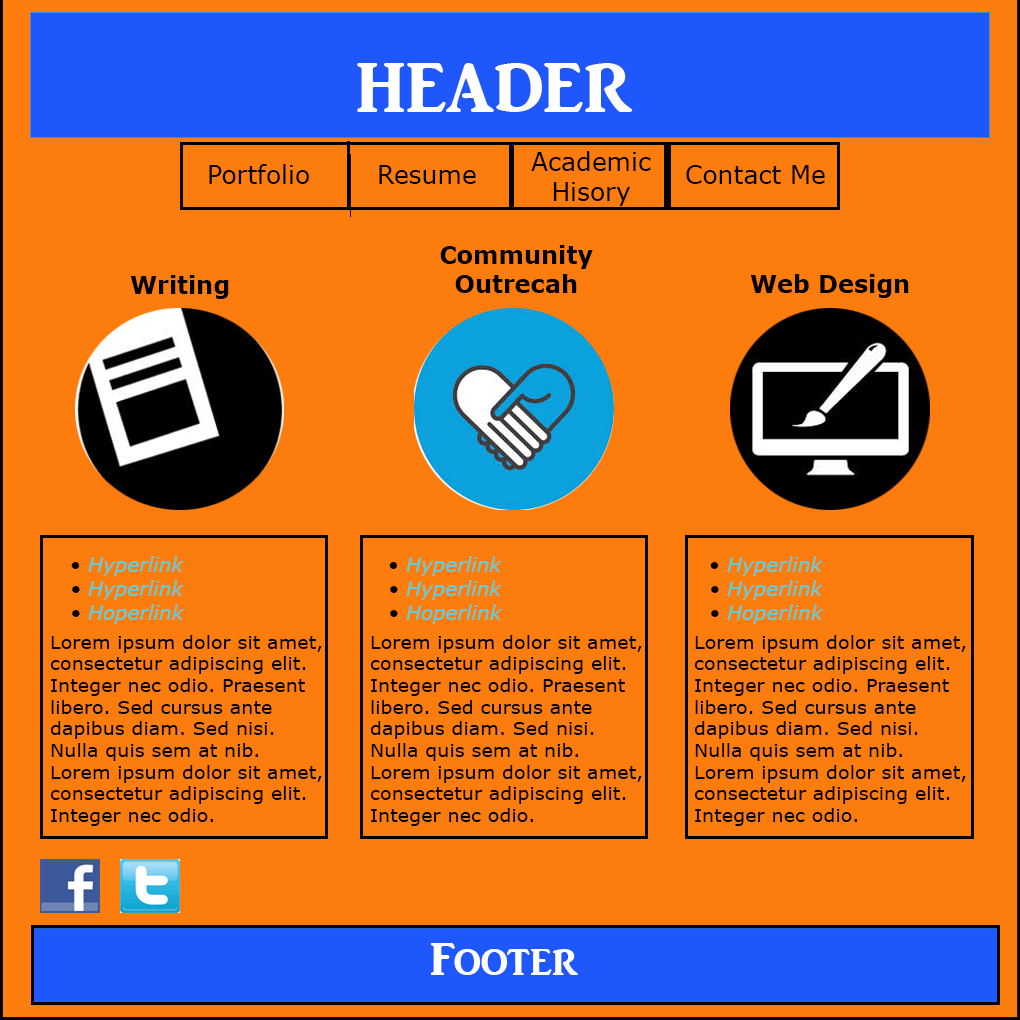
<style>
.page{position:relative;width:1020px;height:1020px;background:#fc7d0d}
.page>*{position:absolute;margin:0}
.t1{font:72px "ARJULIAN";color:#ffffff}
.t2{font:72px "ARJULIAN";color:#66ffff}
.t3{font:25px "Verdana";color:#000000}
.t4{font:24px "Verdana-Bold";color:#000000}
.t5{font:20px "Verdana-Italic";color:#58cfdd}
.t6{font:20px "Verdana";color:#000000}
.t7{font:20px "Verdana-Italic";color:#000000}
.t8{font:18.1px "Verdana";color:#000000;scale:1.06 1}
.t9{font:48px "ARJULIAN";color:#ffffff}
</style>
<div class="page">
<p class="t1" style="left:357px;top:63px;width:276px;height:49px">HEADER</p>
<p class="t1" style="left:357px;top:63px;width:276px;height:49px"><span class="t2"><br></span>HEADER</p>
<p class="t3" style="left:531px;top:151px;width:120px;height:55px;text-align:center">Academic<br>Hisory</p>
<p class="t3" style="left:209px;top:164px;width:100px;height:20px">Portfolio</p>
<p class="t3" style="left:379px;top:165px;width:97px;height:19px">Resume</p>
<p class="t3" style="left:686px;top:165px;width:139px;height:19px">Contact Me</p>
<p class="t4" style="left:440px;top:245px;width:153px;height:48px;text-align:center">Community<br>Outrecah</p>
<p class="t4" style="left:130px;top:275px;width:99px;height:24px">Writing</p>
<p class="t4" style="left:750px;top:274px;width:159px;height:24px">Web Design</p>
<p class="t5" style="left:71px;top:556px;width:114px;height:68px"><span class="t6">• </span>Hyperlink<br><span class="t7">•</span> Hyperlink<br><span class="t7">• </span>Hoperlink</p>
<p class="t5" style="left:389px;top:556px;width:114px;height:68px"><span class="t6">• </span>Hyperlink<br><span class="t7">•</span> Hyperlink<br><span class="t7">• </span>Hoperlink</p>
<p class="t5" style="left:710px;top:556px;width:114px;height:68px"><span class="t6">• </span>Hyperlink<br><span class="t7">•</span> Hyperlink<br><span class="t7">•</span> Hoperlink</p>
<p class="t8" style="left:50px;top:635px;width:272px;height:191px">Lorem ipsum dolor sit amet, consectetur adipiscing elit. Integer nec odio. Praesent libero. Sed cursus ante dapibus diam. Sed nisi. Nulla quis sem at nib. Lorem ipsum dolor sit amet, consectetur adipiscing elit. Integer nec odio.</p>
<p class="t8" style="left:370px;top:635px;width:272px;height:191px">Lorem ipsum dolor sit amet, consectetur adipiscing elit. Integer nec odio. Praesent libero. Sed cursus ante dapibus diam. Sed nisi. Nulla quis sem at nib. Lorem ipsum dolor sit amet, consectetur adipiscing elit. Integer nec odio.</p>
<p class="t8" style="left:694px;top:635px;width:272px;height:191px">Lorem ipsum dolor sit amet, consectetur adipiscing elit. Integer nec odio. Praesent libero. Sed cursus ante dapibus diam. Sed nisi. Nulla quis sem at nib. Lorem ipsum dolor sit amet, consectetur adipiscing elit. Integer nec odio.</p>
<p class="t9" style="left:430px;top:943px;width:148px;height:32px">Footer</p>
<p class="t9" style="left:430px;top:943px;width:148px;height:32px">Footer</p>
</div>
